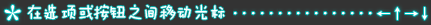
<style>
.page{position:relative;width:431px;height:25px;background:#333333}
.page>*{position:absolute;margin:0}
.t1{font:18px "¢è?";color:#ffffff}
</style>
<div class="page">
<p class="t1" style="left:27px;top:4px;width:198px;height:16px">在选项或按钮之间移动光标</p>
</div>
